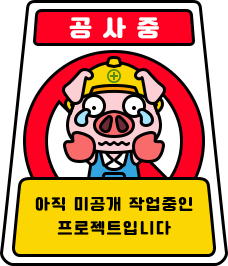
<style>
.page{position:relative;width:228px;height:266px;background:#ffffff}
.page>*{position:absolute;margin:0}
.t1{font:24px "Cafe24SsurroundOTF";letter-spacing:0.05em;color:#ffffff;font-weight:bold}
.t2{font:16px/24px "Cafe24SsurroundOTF";letter-spacing:0.05em;color:#000000;font-weight:bold}
</style>
<div class="page">
<p class="t1" style="left:69px;top:17px;width:90px;height:22px">공 사 중</p>
<p class="t2" style="left:35px;top:196px;width:158px;height:39px;text-align:center">아직 미공개 작업중인<br>프로젝트입니다</p>
</div>
